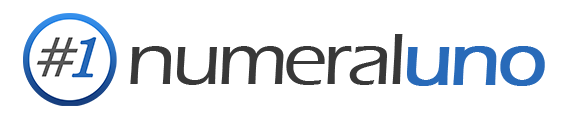
<style>
.page{position:relative;width:574px;height:118px;background:#ffffff}
.page>*{position:absolute;margin:0}
.t1{font:75px "ErasITC-Medium";letter-spacing:-0.05em;color:#383838;scale:1.1 1}
.t2{font:75px "ErasITC-Medium";letter-spacing:-0.05em;color:#286ab9;font-weight:bold;scale:1.1 1}
</style>
<div class="page">
<p class="t1" style="left:130px;top:34px;width:415px;height:52px">numeral<span class="t2">uno</span></p>
</div>
